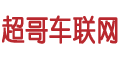
<style>
.page{position:relative;width:120px;height:60px;background:#ffffff}
.page>*{position:absolute;margin:0}
.t1{font:28.8px "STYuanti-SC-Regular";letter-spacing:0.025em;color:#b9282e;font-weight:bold;scale:0.78 1}
</style>
<div class="page">
<p class="t1" style="left:2px;top:15px;width:116px;height:29px">超哥车联网</p>
</div>
